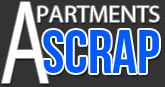
<style>
.page{position:relative;width:165px;height:87px;background:#333333}
.page>*{position:absolute;margin:0}
.t1{font:119.5px "MyriadPro-Regular";color:#ffffff;scale:0.69 1}
.t2{font:23.2px "MyriadPro-Regular";color:#ffffff;scale:1.05 1}
.t3{font:60.3px "BebasNeue";color:#005aff}
</style>
<div class="page">
<p class="t1" style="left:2px;top:2px;width:47px;height:81px">A</p>
<p class="t2" style="left:37px;top:6px;width:123px;height:16px">PARTMENTS</p>
<p class="t3" style="left:43px;top:30px;width:116px;height:43px">scrap</p>
</div>
